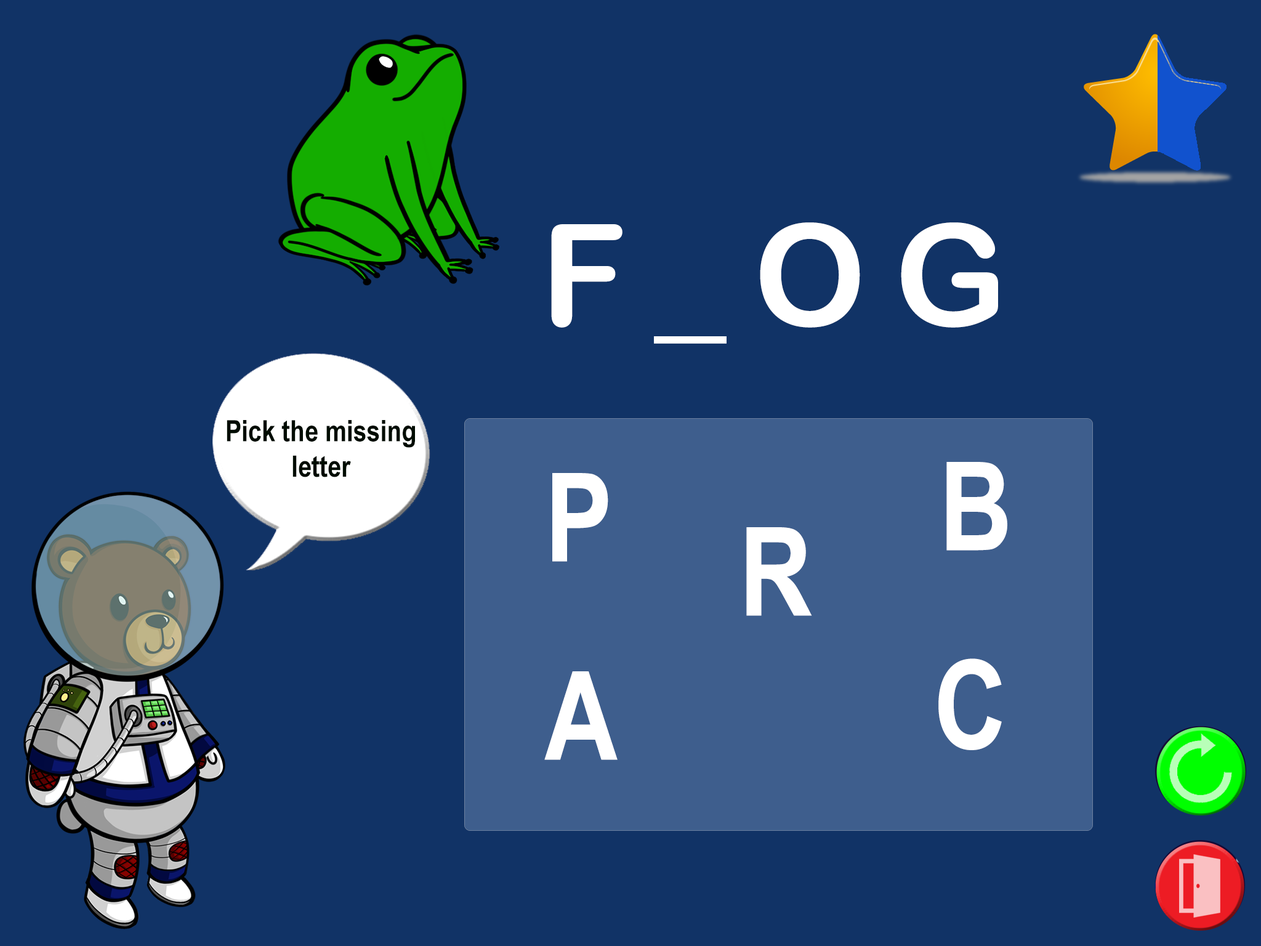
<style>
.page{position:relative;width:1261px;height:946px;background:#113366}
.page>*{position:absolute;margin:0}
.t1{font:141.6px "ArialRoundedMTBold";letter-spacing:0.2em;color:#ffffff}
.t2{font:29.6px "ArialNarrow-Bold";color:#000c01}
.t3{font:123.1px "ArialNarrow-Bold";color:#ffffff}
</style>
<div class="page">
<p class="t1" style="left:551px;top:222px;width:447px;height:122px">F_OG</p>
<p class="t2" style="left:227px;top:420px;width:188px;height:57px;text-align:center">Pick the missing letter</p>
<p class="t3" style="left:946px;top:462px;width:61px;height:88px">B</p>
<p class="t3" style="left:552px;top:473px;width:56px;height:89px">P</p>
<p class="t3" style="left:746px;top:527px;width:66px;height:89px">R</p>
<p class="t3" style="left:938px;top:658px;width:64px;height:92px">C</p>
<p class="t3" style="left:544px;top:671px;width:74px;height:89px">A</p>
</div>
